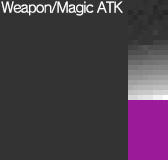
<style>
.page{position:relative;width:168px;height:160px;background:#333333}
.page>*{position:absolute;margin:0}
.t1{font:14px "RodinNTLGPro-M";letter-spacing:-0.05em;color:#ffffff}
</style>
<div class="page">
<p class="t1" style="left:1px;top:1px;width:122px;height:15px">Weapon/Magic ATK</p>
</div>
